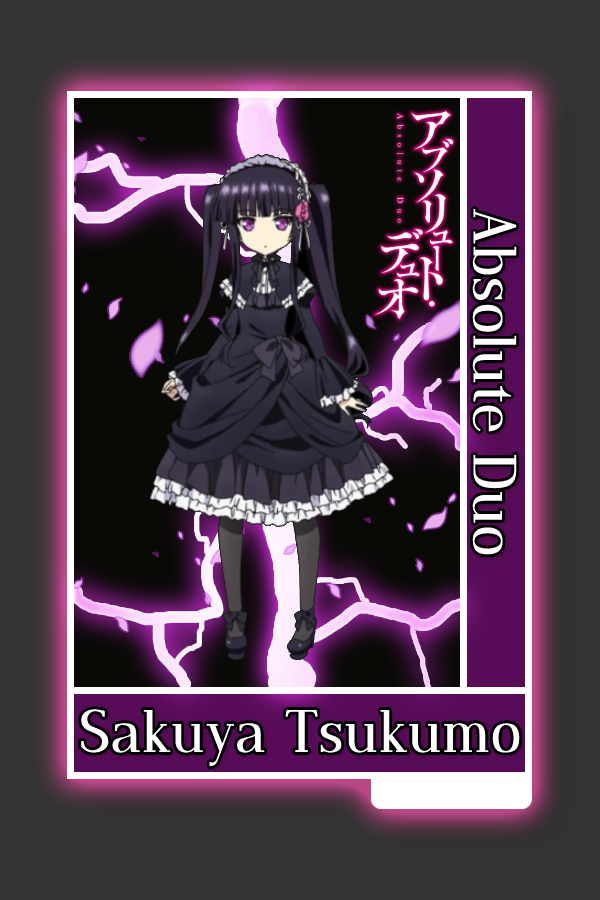
<style>
.page{position:relative;width:600px;height:900px;background:#333333}
.page>*{position:absolute;margin:0}
.t1{font:60px "DustismoRoman";color:#ffffff}
.t2{font:59px "DustismoRoman";color:#ffffff}
</style>
<div class="page">
<p class="t1" style="left:472px;top:208px;width:45px;height:347px;rotate:90deg">Absolute Duo</p>
<p class="t2" style="left:81px;top:709px;width:439px;height:59px">Sakuya Tsukumo</p>
</div>
